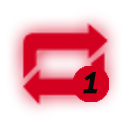
<style>
.page{position:relative;width:124px;height:124px;background:#ffffff}
.page>*{position:absolute;margin:0}
.t1{font:30.3px "PTSans-Bold";letter-spacing:-0.025em;color:#080808;font-weight:bold;font-style:italic}
</style>
<div class="page">
<p class="t1" style="left:83px;top:72px;width:15px;height:22px">1</p>
</div>
